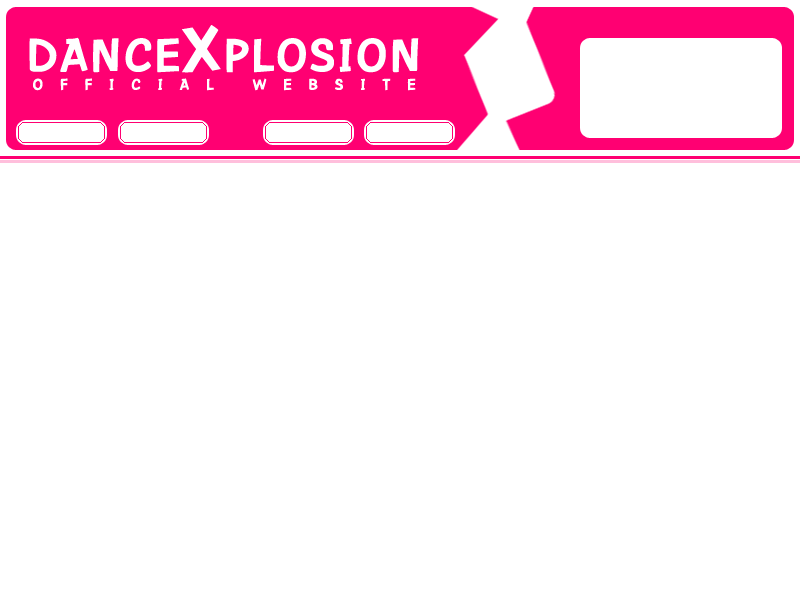
<style>
.page{position:relative;width:800px;height:600px;background:#ffffff}
.page>*{position:absolute;margin:0}
.t1{font:72px "DSEKatreeya";letter-spacing:0.025em;color:#ffffff}
.t2{font:100px "DSEKatreeya";letter-spacing:0.025em;color:#ffffff}
.t3{font:24px "DSEKatreeya";letter-spacing:0.7em;color:#ffffff}
</style>
<div class="page">
<p class="t1" style="left:29px;top:25px;width:390px;height:48px">DANCE<span class="t2">X</span>PLOSION</p>
<p class="t3" style="left:33px;top:78px;width:383px;height:13px">OFFICIAL WEBSITE</p>
</div>
